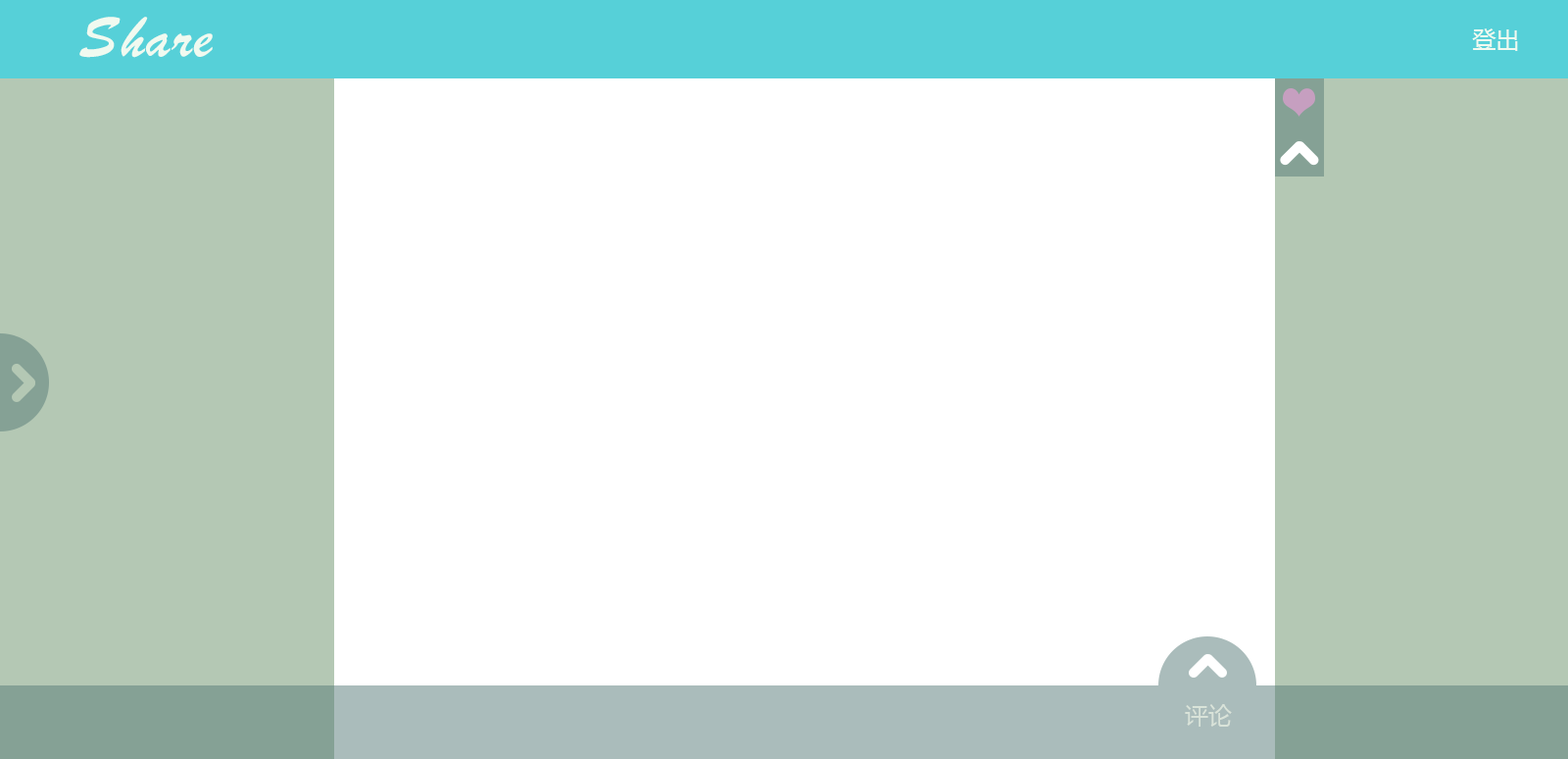
<style>
.page{position:relative;width:1568px;height:759px;background:#ffffff}
.page>*{position:absolute;margin:0}
.t1{font:50.5px "Brussels";color:#f0faf0}
.t2{font:23.5px "MicrosoftYaHei";color:#f0faf0}
.t3{font:23.5px "MicrosoftYaHei";color:#d9e3d9}
</style>
<div class="page">
<p class="t1" style="left:79px;top:17px;width:134px;height:41px">Share</p>
<p class="t2" style="left:1472px;top:28px;width:46px;height:23px">登出</p>
<p class="t3" style="left:1185px;top:704px;width:47px;height:22px">评论</p>
</div>
